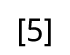
<style>
.page{position:relative;width:70px;height:55px;background:#ffffff}
.page>*{position:absolute;margin:0}
.t1{font:31.8px "DroidSans";color:#000000}
</style>
<div class="page">
<p class="t1" style="left:19px;top:18px;width:32px;height:29px">[5]</p>
</div>
